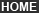
<style>
.page{position:relative;width:39px;height:13px}
.page>*{position:absolute;margin:0}
.t1{font:12px "Arial-BoldMT";color:#ffffff}
</style>
<div class="page">
<p class="t1" style="left:1px;top:2px;width:36px;height:9px">HOME</p>
</div>
